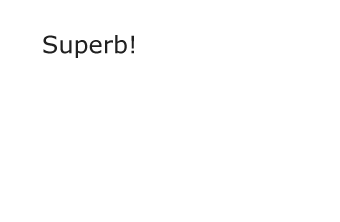
<style>
.page{position:relative;width:340px;height:222px;background:#ffffff}
.page>*{position:absolute;margin:0}
.t1{font:24px "Verdana";color:#202020}
</style>
<div class="page">
<p class="t1" style="left:43px;top:35px;width:91px;height:23px">Superb!</p>
</div>
